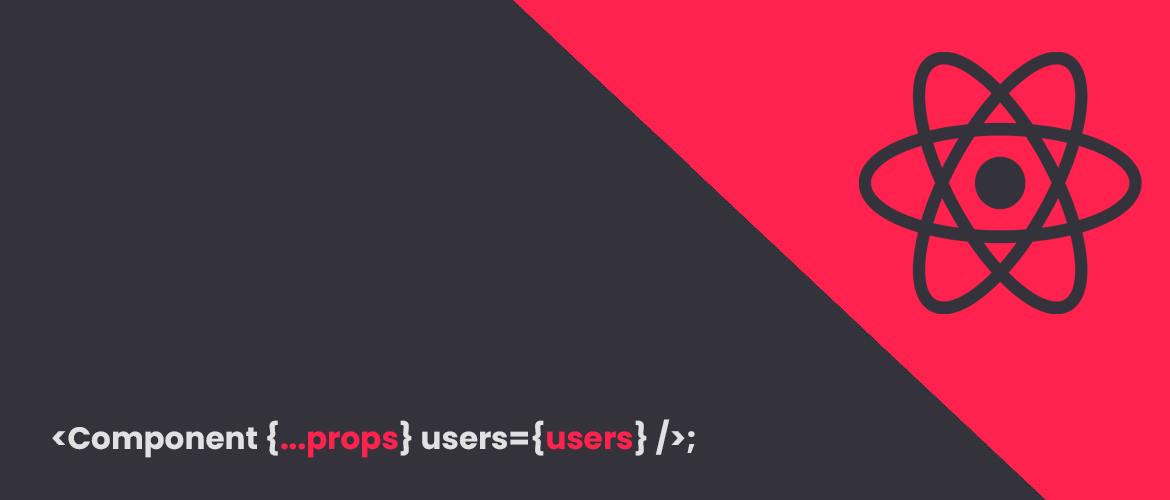
<style>
.page{position:relative;width:1170px;height:500px;background:#34333b}
.page>*{position:absolute;margin:0}
.t1{font:31px "Poppins-Bold";color:#e1e0e3}
.t2{font:31px "Poppins-Bold";color:#ff224e}
</style>
<div class="page">
<p class="t1" style="left:52px;top:419px;width:643px;height:39px">&lt;Component {<span class="t2">...props</span>} users={<span class="t2">users</span>} /&gt;;</p>
</div>
